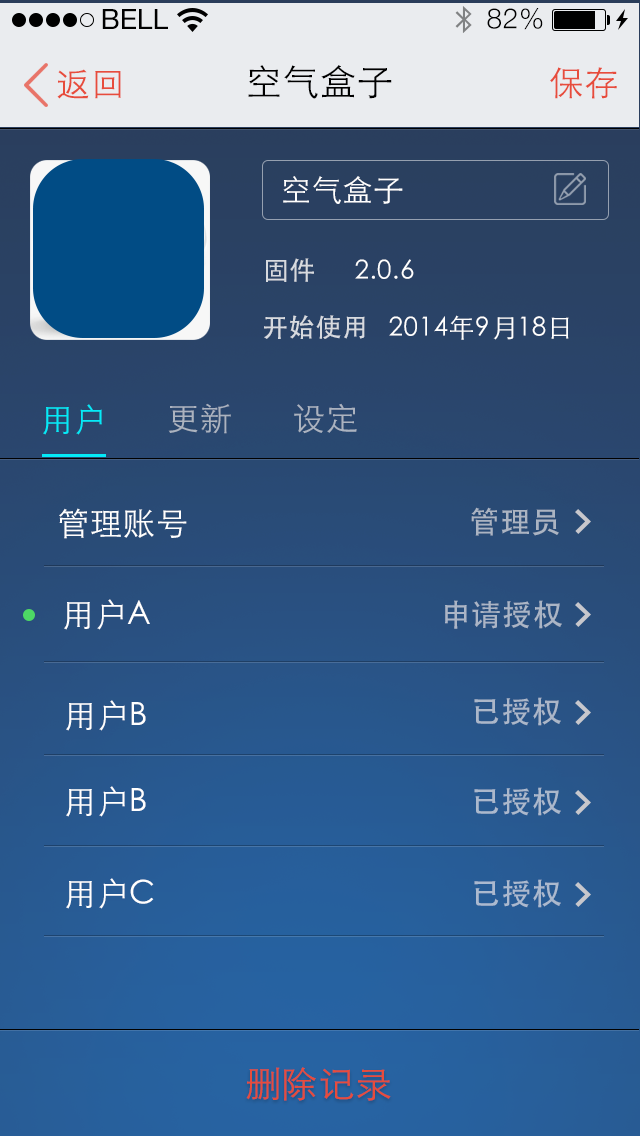
<style>
.page{position:relative;width:640px;height:1136px}
.page>*{position:absolute;margin:0}
.t1{font:28px "HelveticaNeue";color:#000000;text-transform:uppercase}
.t2{font:28px "HelveticaNeue-Light";letter-spacing:0.025em;color:#000000}
.t3{font:36px "STHeitiSC-Light";letter-spacing:0.025em;color:#000000}
.t4{font:34px "STHeitiSC-Light";letter-spacing:0.025em;color:#e74c3c}
.t5{font:30px "STHeitiSC-Light";letter-spacing:0.025em;color:#ffffff}
.t6{font:26px "AdobeHeitiStd-Regular";letter-spacing:0.025em;color:#d7dadf}
.t7{font:26px "STHeitiSC-Light";letter-spacing:0.025em;color:#ffffff}
.t8{font:32px "STHeitiSC-Light";letter-spacing:0.025em;color:#04eaf8}
.t9{font:32px "STHeitiSC-Light";letter-spacing:0.025em;color:#abb3bf}
.t10{font:32px "STHeitiSC-Light";letter-spacing:0.025em;color:#abb3c0}
.t11{font:32px "STHeitiSC-Light";letter-spacing:0.025em;color:#ffffff}
.t12{font:30px "AdobeHeitiStd-Regular";letter-spacing:0.025em;color:#abb4c2}
.t13{font:30px "AdobeHeitiStd-Regular";letter-spacing:0.025em;color:#abb5c6}
.t14{font:30px "AdobeHeitiStd-Regular";letter-spacing:0.025em;color:#abb7c9}
.t15{font:30px "AdobeHeitiStd-Regular";letter-spacing:0.025em;color:#abb8cc}
.t16{font:30px "AdobeHeitiStd-Regular";letter-spacing:0.025em;color:#abb9ce}
.t17{font:36px "STHeitiSC-Light";letter-spacing:0.025em;color:#e74c3c}
</style>
<div class="page">
<p class="t1" style="left:102px;top:9px;width:66px;height:20px">Bell</p>
<p class="t2" style="left:487px;top:8px;width:56px;height:22px">82%</p>
<p class="t3" style="left:248px;top:65px;width:144px;height:34px">空气盒子</p>
<p class="t4" style="left:57px;top:69px;width:64px;height:30px">返回</p>
<p class="t4" style="left:550px;top:67px;width:67px;height:32px">保存</p>
<p class="t5" style="left:283px;top:176px;width:120px;height:28px">空气盒子</p>
<p class="t6" style="left:266px;top:258px;width:48px;height:24px">固件</p>
<p class="t7" style="left:355px;top:259px;width:59px;height:20px">2.0.6</p>
<p class="t6" style="left:264px;top:315px;width:101px;height:24px">开始使用</p>
<p class="t7" style="left:389px;top:315px;width:180px;height:25px">2014年9月18日</p>
<p class="t8" style="left:43px;top:404px;width:59px;height:31px">用户</p>
<p class="t9" style="left:168px;top:403px;width:63px;height:31px">更新</p>
<p class="t10" style="left:294px;top:403px;width:63px;height:31px">设定</p>
<p class="t11" style="left:59px;top:508px;width:128px;height:31px">管理账号</p>
<p class="t12" style="left:471px;top:507px;width:88px;height:29px">管理员</p>
<p class="t11" style="left:64px;top:599px;width:86px;height:31px">用户A</p>
<p class="t13" style="left:445px;top:600px;width:117px;height:29px">申请授权</p>
<p class="t11" style="left:66px;top:700px;width:80px;height:31px">用户B</p>
<p class="t14" style="left:474px;top:697px;width:87px;height:29px">已授权</p>
<p class="t11" style="left:66px;top:786px;width:80px;height:31px">用户B</p>
<p class="t15" style="left:474px;top:787px;width:87px;height:29px">已授权</p>
<p class="t11" style="left:66px;top:878px;width:88px;height:31px">用户C</p>
<p class="t16" style="left:474px;top:879px;width:87px;height:29px">已授权</p>
<p class="t17" style="left:246px;top:1067px;width:145px;height:34px">删除记录</p>
</div>
